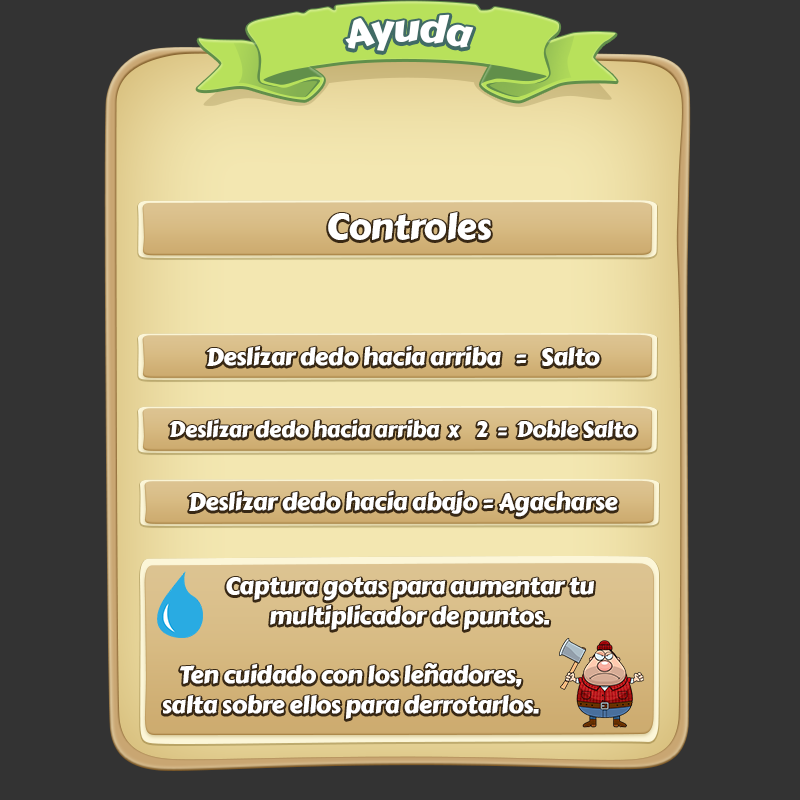
<style>
.page{position:relative;width:800px;height:800px;background:#333333}
.page>*{position:absolute;margin:0}
.t1{font:38px "CarterOne";letter-spacing:-0.02em;color:#ffffff}
.t2{font:36px "CarterOne";letter-spacing:-0.02em;color:#ffffff}
.t3{font:22px/36.2px "CarterOne";letter-spacing:-0.02em;color:#ffffff}
.t4{font:24px/36.2px "CarterOne";letter-spacing:-0.02em;color:#ffffff}
.t5{font:24px/30px "CarterOne";letter-spacing:-0.02em;color:#ffffff}
</style>
<div class="page">
<p class="t1" style="left:345px;top:14px;width:129px;height:37px">Ayuda</p>
<p class="t2" style="left:328px;top:212px;width:163px;height:28px">Controles</p>
<p class="t3" style="left:169px;top:345px;width:468px;height:172px;text-align:center"><span class="t4">Deslizar dedo hacia arriba   =   Salto<br><br></span>Deslizar dedo hacia arriba  x    2  =  Doble Salto<br><span class="t4"><br>Deslizar dedo hacia abajo = Agacharse</span></p>
<p class="t5" style="left:226px;top:577px;width:368px;height:53px;text-align:center">Captura gotas para aumentar tu<br>multiplicador de puntos.</p>
<p class="t5" style="left:163px;top:663px;width:376px;height:56px;text-align:center">Ten cuidado con los leñadores,<br>salta sobre ellos para derrotarlos.</p>
</div>
